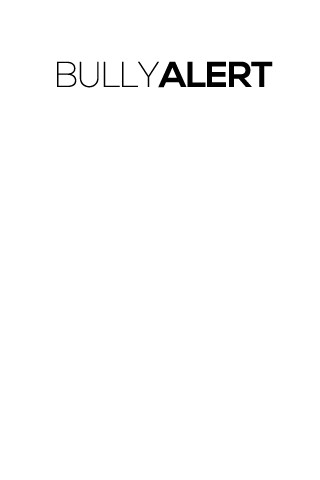
<style>
.page{position:relative;width:320px;height:480px;background:#ffffff}
.page>*{position:absolute;margin:0}
.t1{font:36px "NexaThin";letter-spacing:-0.05em;color:#000000}
.t2{font:36px "Nexa-XBold";letter-spacing:-0.05em;color:#000000}
</style>
<div class="page">
<p class="t1" style="left:57px;top:61px;width:216px;height:27px">BULLY<span class="t2">ALERT</span></p>
</div>
